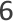
<style>
.page{position:relative;width:13px;height:21px;background:#ffffff}
.page>*{position:absolute;margin:0}
.t1{font:30px "Calibri";color:#3c3c3c}
</style>
<div class="page">
<p class="t1" style="left:0px;top:0px;width:13px;height:21px">6</p>
</div>
